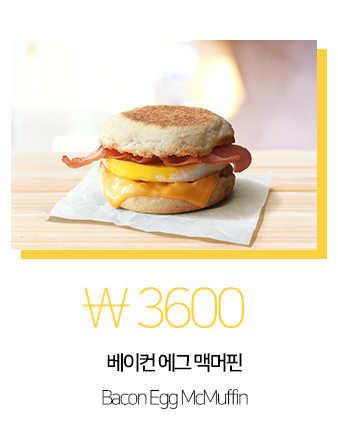
<style>
.page{position:relative;width:338px;height:426px;background:#ffffff}
.page>*{position:absolute;margin:0}
.t1{font:55px "NanumSquareL";letter-spacing:-0.1em;color:#fed141}
.t2{font:20px/35px "NanumSquareL";letter-spacing:-0.1em;color:#040000}
.t3{font:20px/50px "NanumSquareB";letter-spacing:-0.1em;color:#040000}
</style>
<div class="page">
<p class="t1" style="left:82px;top:287px;width:163px;height:41px">\ 3600</p>
<p class="t2" style="left:102px;top:353px;width:146px;height:57px;text-align:center"><span class="t3">베이컨 에그 맥머핀<br></span>Bacon Egg McMuffin</p>
</div>
